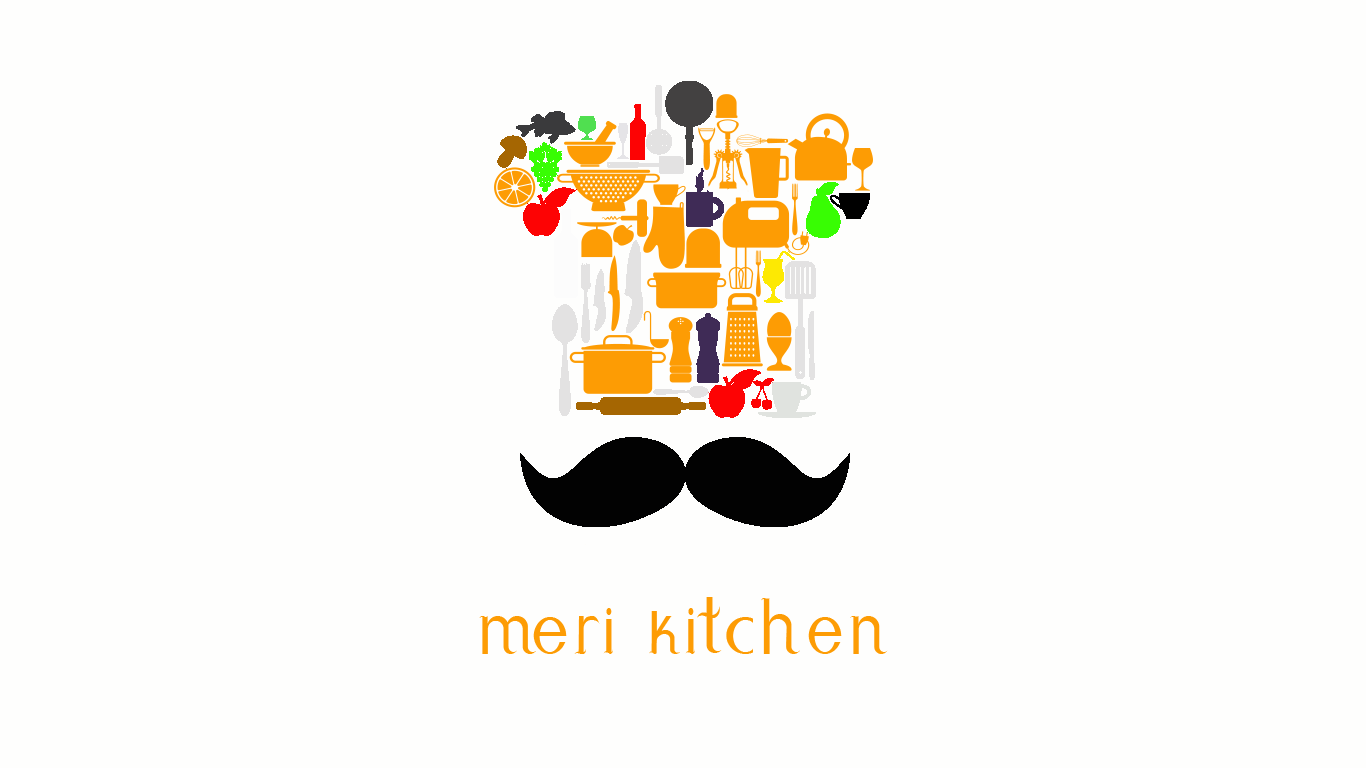
<style>
.page{position:relative;width:1366px;height:768px;background:#fefefd}
.page>*{position:absolute;margin:0}
.t1{font:75px "IpanemaSecco";color:#fd9c04}
</style>
<div class="page">
<p class="t1" style="left:479px;top:597px;width:409px;height:57px">meri kitchen</p>
</div>
